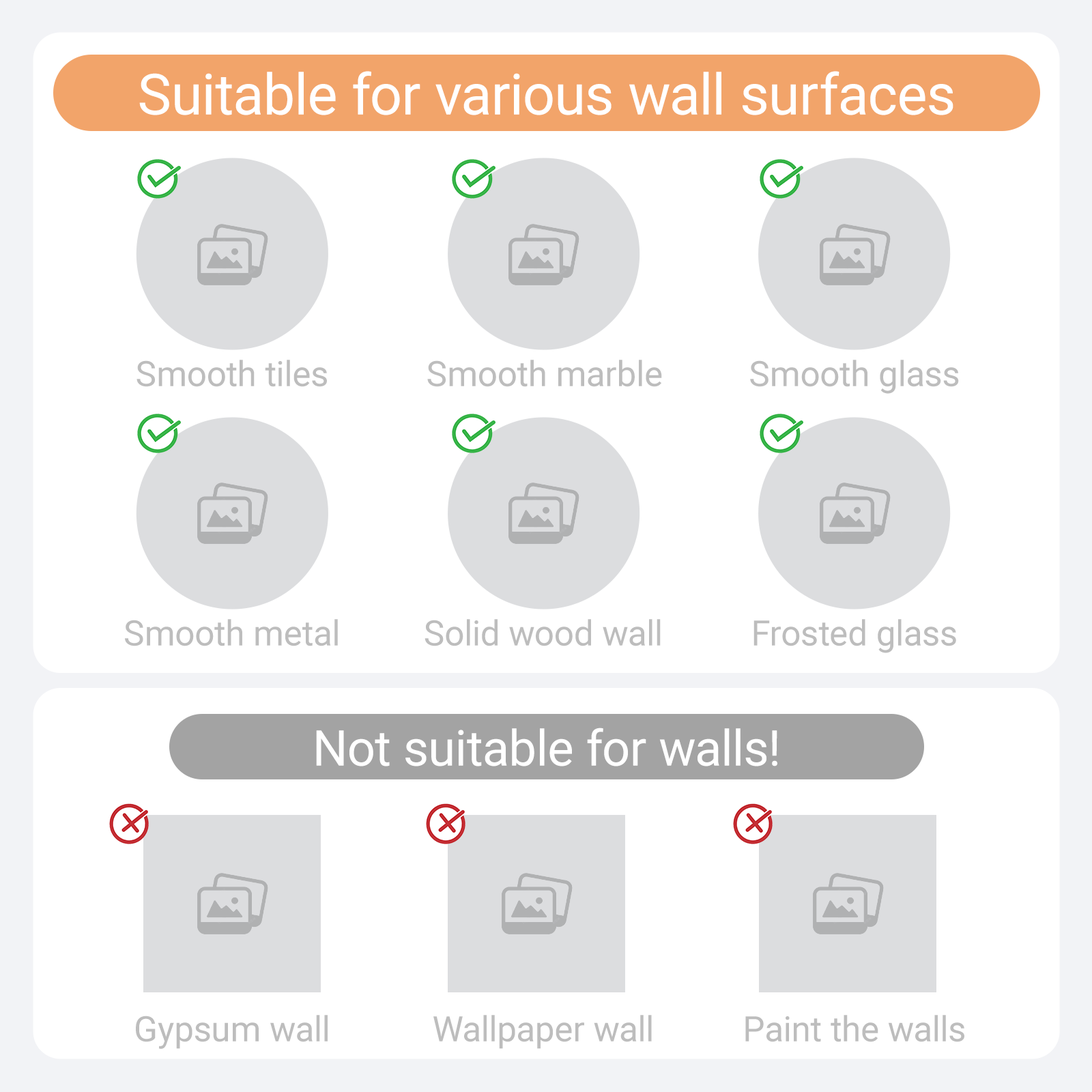
<style>
.page{position:relative;width:1092px;height:1092px;background:#ffffff}
.page>*{position:absolute;margin:0}
.t1{font:56.8px "Roboto-Regular";color:#ffffff}
.t2{font:34.9px "Roboto-Regular";color:#bdbdbd}
.t3{font:49.5px "Roboto-Regular";color:#ffffff}
</style>
<div class="page">
<p class="t1" style="left:139px;top:71px;width:814px;height:44px">Suitable for various wall surfaces</p>
<p class="t2" style="left:136px;top:360px;width:191px;height:27px">Smooth tiles</p>
<p class="t2" style="left:427px;top:360px;width:235px;height:27px">Smooth marble</p>
<p class="t2" style="left:750px;top:360px;width:209px;height:34px">Smooth glass</p>
<p class="t2" style="left:125px;top:619px;width:213px;height:27px">Smooth metal</p>
<p class="t2" style="left:425px;top:619px;width:236px;height:27px">Solid wood wall</p>
<p class="t2" style="left:753px;top:619px;width:203px;height:34px">Frosted glass</p>
<p class="t3" style="left:316px;top:728px;width:461px;height:38px">Not suitable for walls!</p>
<p class="t2" style="left:136px;top:1015px;width:192px;height:34px">Gypsum wall</p>
<p class="t2" style="left:433px;top:1015px;width:219px;height:34px">Wallpaper wall</p>
<p class="t2" style="left:745px;top:1015px;width:219px;height:27px">Paint the walls</p>
</div>
